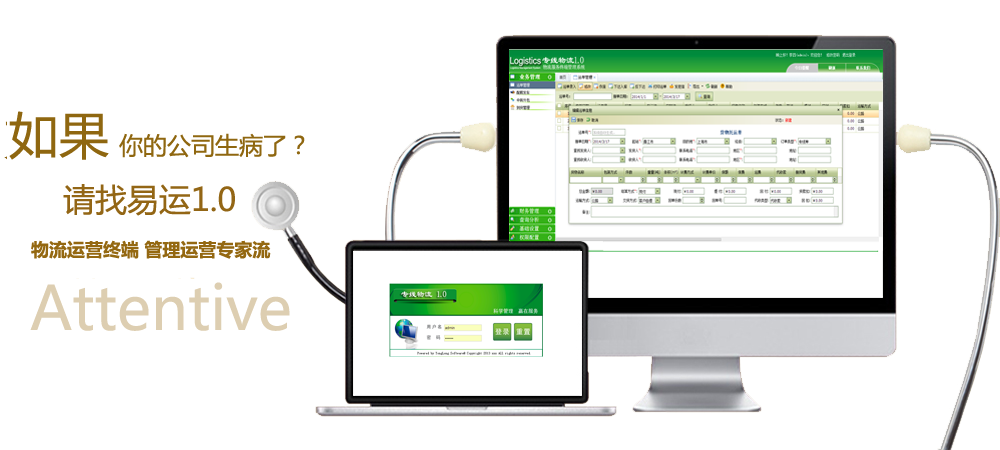
<style>
.page{position:relative;width:1000px;height:450px;background:#ffffff}
.page>*{position:absolute;margin:0}
.t1{font:50px "MicrosoftYaHei";color:#8f6710}
.t2{font:24px "MicrosoftYaHei";color:#8f6710}
.t3{font:32px "MicrosoftYaHei";color:#936615}
.t4{font:18px "MicrosoftYaHei-Bold";color:#946811}
.t5{font:60px "MicrosoftYaHei";color:#ddceb1}
</style>
<div class="page">
<p class="t1" style="left:9px;top:111px;width:100px;height:49px">如果</p>
<p class="t2" style="left:119px;top:133px;width:186px;height:25px">你的公司生病了？</p>
<p class="t3" style="left:63px;top:184px;width:172px;height:32px">请找易运1.0</p>
<p class="t4" style="left:31px;top:240px;width:240px;height:19px">物流运营终端 管理运营专家流</p>
<p class="t5" style="left:30px;top:282px;width:260px;height:49px">Attentive</p>
</div>
